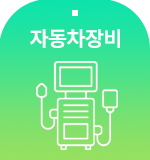
<style>
.page{position:relative;width:150px;height:160px}
.page>*{position:absolute;margin:0}
.t1{font:21.3px "Pretendard-SemiBold";color:#ffffff}
</style>
<div class="page">
<p class="t1" style="left:30px;top:29px;width:90px;height:19px">자동차장비</p>
</div>
